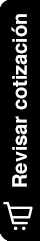
<style>
.page{position:relative;width:40px;height:241px;background:#000000}
.page>*{position:absolute;margin:0}
.t1{font:19.9px "Helvetica-Bold";color:#ffffff}
</style>
<div class="page">
<p class="t1" style="left:11px;top:14px;width:16px;height:173px;rotate:-90deg">Revisar cotización</p>
</div>
